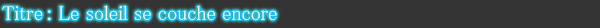
<style>
.page{position:relative;width:600px;height:28px;background:#333333}
.page>*{position:absolute;margin:0}
.t1{font:20px "MS-PMincho";color:#ffffff}
</style>
<div class="page">
<p class="t1" style="left:2px;top:5px;width:275px;height:16px">Titre : Le soleil se couche encore</p>
</div>
